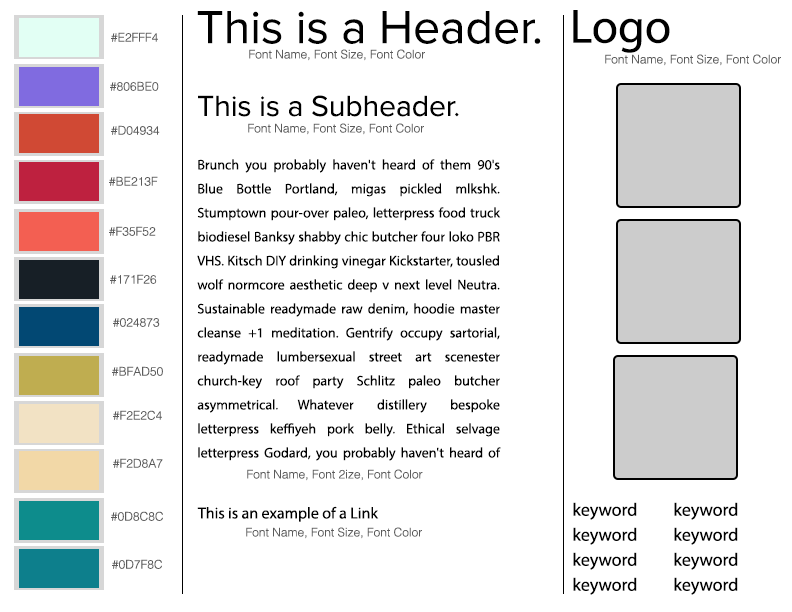
<style>
.page{position:relative;width:792px;height:612px;background:#ffffff}
.page>*{position:absolute;margin:0}
.t1{font:48px "ProximaNova-Regular";color:#000000}
.t2{font:48px "MyriadPro-Regular";color:#000000}
.t3{font:12px "Helvetica-Light";color:#5b5b5b}
.t4{font:30px "ProximaNova-Regular";color:#000000}
.t5{font:14px/24px "MyriadPro-Regular";color:#000000}
.t6{font:12px "Helvetica-Light";color:#5c5c5c}
.t7{font:16px "MyriadPro-Regular";color:#000000}
.t8{font:18px "MyriadPro-Regular";color:#000000}
</style>
<div class="page">
<p class="t1" style="left:197px;top:11px;width:344px;height:33px">This is a Header.</p>
<p class="t2" style="left:573px;top:10px;width:97px;height:43px">Logo</p>
<p class="t3" style="left:111px;top:32px;width:47px;height:10px">#E2FFF4</p>
<p class="t3" style="left:249px;top:49px;width:176px;height:12px">Font Name, Font Size, Font Color</p>
<p class="t3" style="left:605px;top:54px;width:176px;height:12px">Font Name, Font Size, Font Color</p>
<p class="t3" style="left:110px;top:81px;width:49px;height:10px">#806BE0</p>
<p class="t4" style="left:198px;top:95px;width:261px;height:22px">This is a Subheader.</p>
<p class="t3" style="left:111px;top:125px;width:49px;height:10px">#D04934</p>
<p class="t3" style="left:248px;top:123px;width:176px;height:12px">Font Name, Font Size, Font Color</p>
<p class="t5" style="left:197px;top:159px;width:304px;height:302px;text-align:justify">Brunch you probably haven't heard of them 90's Blue Bottle Portland, migas pickled mlkshk. Stumptown pour-over paleo, letterpress food truck biodiesel Banksy shabby chic butcher four loko PBR VHS. Kitsch DIY drinking vinegar Kickstarter, tousled wolf normcore aesthetic deep v next level Neutra. Sustainable readymade raw denim, hoodie master cleanse +1 meditation. Gentrify occupy sartorial, readymade lumbersexual street art scenester church-key roof party Schlitz paleo butcher asymmetrical. Whatever distillery bespoke letterpress keffiyeh pork belly. Ethical selvage letterpress Godard, you probably haven't heard of them distillery normcore 90's whatever.</p>
<p class="t3" style="left:109px;top:176px;width:49px;height:10px">#BE213F</p>
<p class="t3" style="left:109px;top:226px;width:47px;height:10px">#F35F52</p>
<p class="t3" style="left:110px;top:274px;width:47px;height:10px">#171F26</p>
<p class="t3" style="left:113px;top:318px;width:47px;height:9px">#024873</p>
<p class="t3" style="left:112px;top:366px;width:51px;height:10px">#BFAD50</p>
<p class="t3" style="left:113px;top:410px;width:49px;height:10px">#F2E2C4</p>
<p class="t6" style="left:113px;top:458px;width:50px;height:10px">#F2D8A7</p>
<p class="t3" style="left:247px;top:469px;width:176px;height:12px">Font Name, Font 2ize, Font Color</p>
<p class="t7" style="left:197px;top:506px;width:182px;height:16px">This is an example of a Link</p>
<p class="t8" style="left:573px;top:502px;width:64px;height:18px">keyword</p>
<p class="t8" style="left:674px;top:502px;width:64px;height:18px">keyword</p>
<p class="t3" style="left:111px;top:511px;width:52px;height:10px">#0D8C8C</p>
<p class="t3" style="left:246px;top:527px;width:176px;height:12px">Font Name, Font Size, Font Color</p>
<p class="t8" style="left:573px;top:527px;width:64px;height:18px">keyword</p>
<p class="t8" style="left:674px;top:527px;width:64px;height:18px">keyword</p>
<p class="t8" style="left:573px;top:552px;width:64px;height:18px">keyword</p>
<p class="t8" style="left:674px;top:552px;width:64px;height:18px">keyword</p>
<p class="t3" style="left:112px;top:559px;width:50px;height:10px">#0D7F8C</p>
<p class="t8" style="left:573px;top:577px;width:64px;height:18px">keyword</p>
<p class="t8" style="left:674px;top:577px;width:64px;height:18px">keyword</p>
</div>
